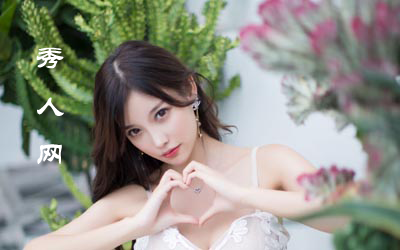
<style>
.page{position:relative;width:400px;height:250px}
.page>*{position:absolute;margin:0}
.t1{font:30px/48px "STLiti";color:#ffffff}
</style>
<div class="page">
<p class="t1" style="left:36px;top:47px;width:28px;height:118px">秀<br>人<br>网</p>
</div>
